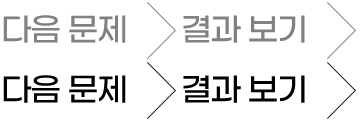
<style>
.page{position:relative;width:360px;height:120px;background:#ffffff}
.page>*{position:absolute;margin:0}
.t1{font:32.1px "GmarketSansMedium";letter-spacing:-0.045em;color:#818181}
.t2{font:32.1px "GmarketSansMedium";letter-spacing:-0.045em;color:#000000}
</style>
<div class="page">
<p class="t1" style="left:3px;top:15px;width:123px;height:28px">다음 문제</p>
<p class="t1" style="left:183px;top:15px;width:122px;height:28px">결과 보기</p>
<p class="t2" style="left:3px;top:75px;width:123px;height:28px">다음 문제</p>
<p class="t2" style="left:183px;top:75px;width:122px;height:28px">결과 보기</p>
</div>
